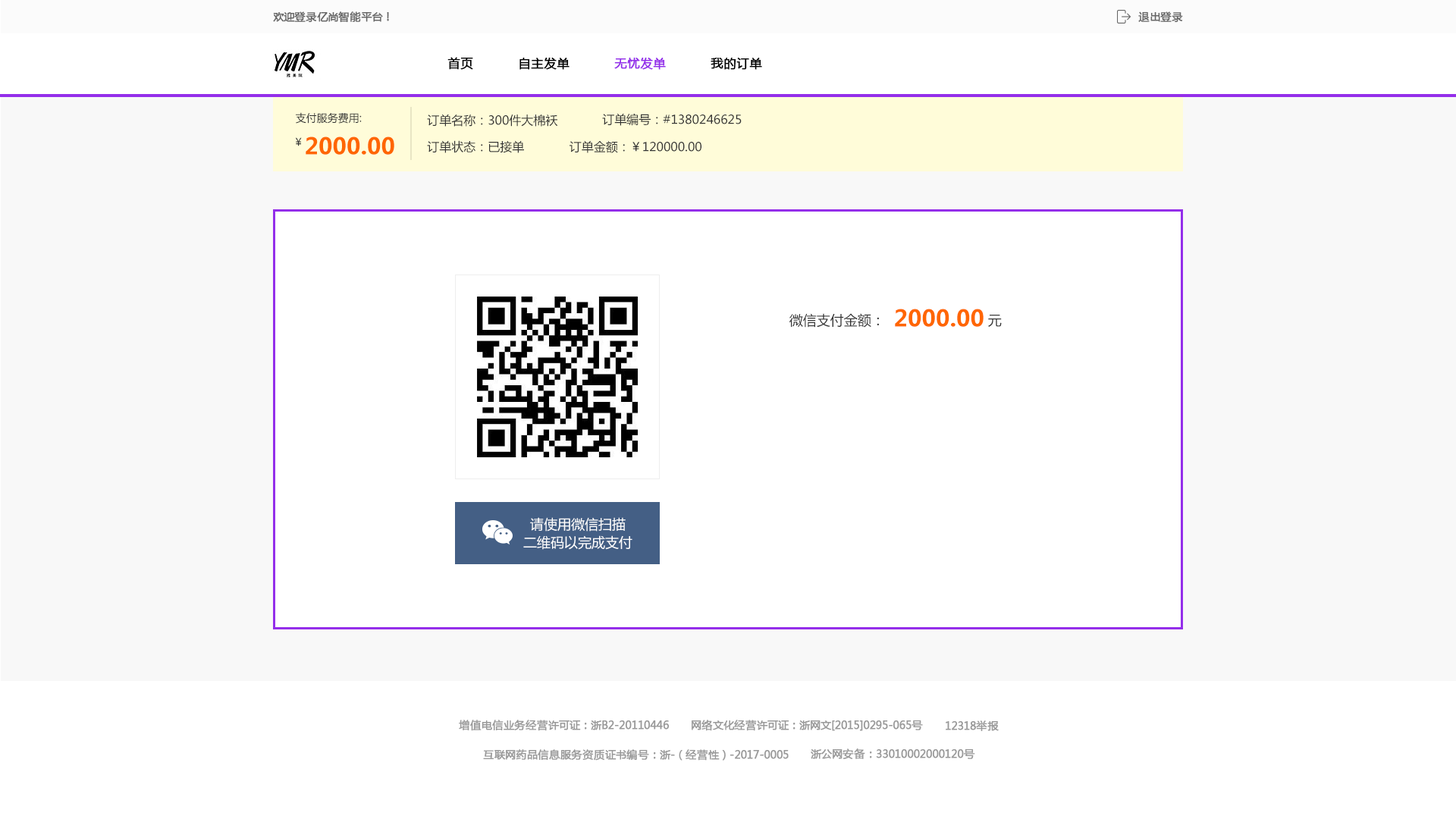
<style>
.page{position:relative;width:1456px;height:819px;background:#ffffff}
.page>*{position:absolute;margin:0}
.t1{font:10.6px "MicrosoftYaHei";color:#666666;font-weight:bold}
.t2{font:12.1px "MicrosoftYaHei";color:#000000;font-weight:bold}
.t3{font:12.1px "MicrosoftYaHei";color:#942eea;font-weight:bold}
.t4{font:10.6px "MicrosoftYaHei";color:#333333}
.t5{font:12.1px "MicrosoftYaHei";color:#333333}
.t6{font:10.6px "MicrosoftYaHei";letter-spacing:0.02em;color:#333333}
.t7{font:22.7px "MicrosoftYaHei-Bold";color:#ff6600}
.t8{font:13.6px "MicrosoftYaHei";color:#333333}
.t9{font:13.6px/18.2px "MicrosoftYaHei";color:#ffffff}
.t10{font:10.6px "MicrosoftYaHei";color:#999999;font-weight:bold}
</style>
<div class="page">
<p class="t1" style="left:273px;top:11px;width:116px;height:12px">欢迎登录亿尚智能平台！</p>
<p class="t1" style="left:1138px;top:11px;width:45px;height:12px">退出登录</p>
<p class="t2" style="left:447px;top:57px;width:26px;height:13px">首页</p>
<p class="t2" style="left:519px;top:58px;width:51px;height:12px">自主发单</p>
<p class="t3" style="left:614px;top:58px;width:52px;height:12px">无忧发单</p>
<p class="t2" style="left:711px;top:58px;width:51px;height:12px">我的订单</p>
<p class="t4" style="left:296px;top:112px;width:66px;height:12px">支付服务费用:</p>
<p class="t5" style="left:427px;top:114px;width:131px;height:13px">订单名称：300件大棉袄</p>
<p class="t5" style="left:602px;top:113px;width:140px;height:13px">订单编号：#1380246625</p>
<p class="t6" style="left:295px;top:137px;width:7px;height:9px">￥</p>
<p class="t7" style="left:306px;top:136px;width:88px;height:19px">2000.00</p>
<p class="t5" style="left:427px;top:140px;width:97px;height:13px">订单状态：已接单</p>
<p class="t5" style="left:570px;top:140px;width:131px;height:13px">订单金额：￥120000.00</p>
<p class="t8" style="left:789px;top:313px;width:90px;height:15px">微信支付金额：</p>
<p class="t7" style="left:895px;top:309px;width:89px;height:18px">2000.00</p>
<p class="t8" style="left:988px;top:315px;width:14px;height:12px">元</p>
<p class="t9" style="left:523px;top:517px;width:109px;height:33px;text-align:center">请使用微信扫描<br>二维码以完成支付</p>
<p class="t10" style="left:459px;top:720px;width:211px;height:11px">增值电信业务经营许可证：浙B2-20110446</p>
<p class="t10" style="left:692px;top:720px;width:231px;height:11px">网络文化经营许可证：浙网文[2015]0295-065号</p>
<p class="t10" style="left:946px;top:720px;width:53px;height:12px">12318举报</p>
<p class="t10" style="left:483px;top:749px;width:306px;height:12px">互联网药品信息服务资质证书编号：浙-（经营性）-2017-0005</p>
<p class="t10" style="left:811px;top:748px;width:164px;height:11px">浙公网安备：33010002000120号</p>
</div>
